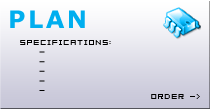
<style>
.page{position:relative;width:210px;height:109px}
.page>*{position:absolute;margin:0}
.t1{font:24px "Verdana-Bold";letter-spacing:0.1em;color:#00aeef}
.t2{font:8px "04b08";letter-spacing:0.1em;color:#000000}
</style>
<div class="page">
<p class="t1" style="left:10px;top:10px;width:75px;height:18px">PLAN</p>
<p class="t2" style="left:20px;top:40px;width:91px;height:51px">SPECIFICATIONS:<br>    -<br>    -<br>    -<br>    -<br>    -</p>
<p class="t2" style="left:151px;top:94px;width:49px;height:5px">ORDER -&gt;</p>
</div>
